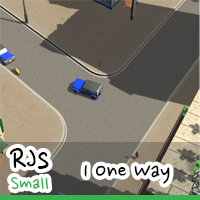
<style>
.page{position:relative;width:200px;height:200px}
.page>*{position:absolute;margin:0}
.t1{font:36.3px "NanumPen";color:#000000}
.t2{font:26px "NanumPen";color:#000000}
.t3{font:21.5px "NanumPen";color:#37b24d}
</style>
<div class="page">
<p class="t1" style="left:9px;top:148px;width:40px;height:21px">RJs</p>
<p class="t2" style="left:84px;top:165px;width:86px;height:19px">1 One Way</p>
<p class="t3" style="left:11px;top:177px;width:38px;height:13px">Small</p>
</div>
